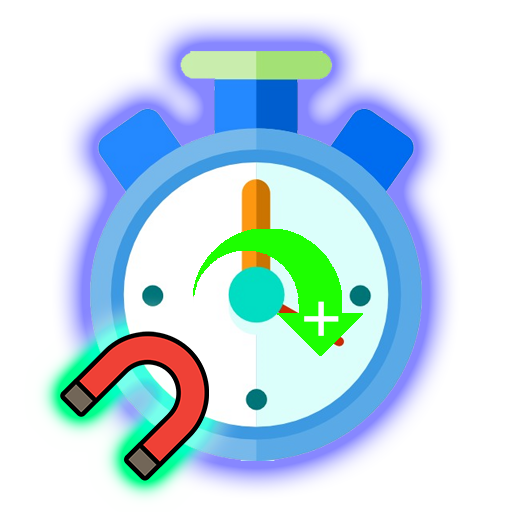
<style>
.page{position:relative;width:512px;height:512px;background:#ffffff}
.page>*{position:absolute;margin:0}
.t1{font:69.4px "BritannicBold";color:#ffffff}
</style>
<div class="page">
<p class="t1" style="left:304px;top:301px;width:35px;height:35px">+</p>
</div>
